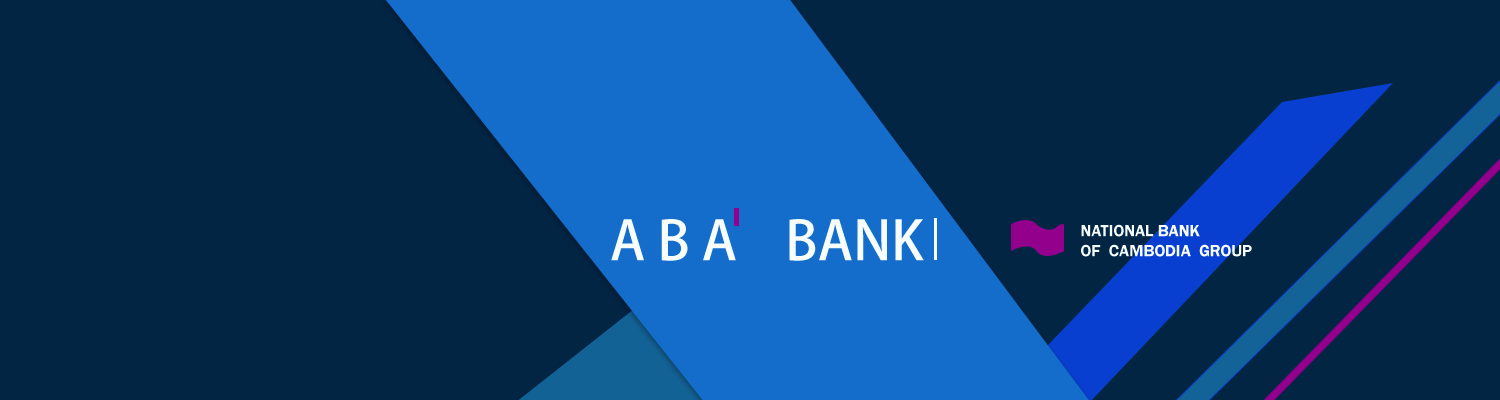
<style>
.page{position:relative;width:1500px;height:400px;background:#022544}
.page>*{position:absolute;margin:0}
.t1{font:53.7px "AdobeFanHeitiStd-Bold";color:#f6fdfc}
.t2{font:16.7px "FranklinGothic-Demi";color:#f6fdfc}
</style>
<div class="page">
<p class="t1" style="left:611px;top:219px;width:313px;height:42px">A B A    BANK</p>
<p class="t2" style="left:1081px;top:224px;width:171px;height:33px">NATIONAL BANK<br>OF  CAMBODIA  GROUP</p>
</div>
